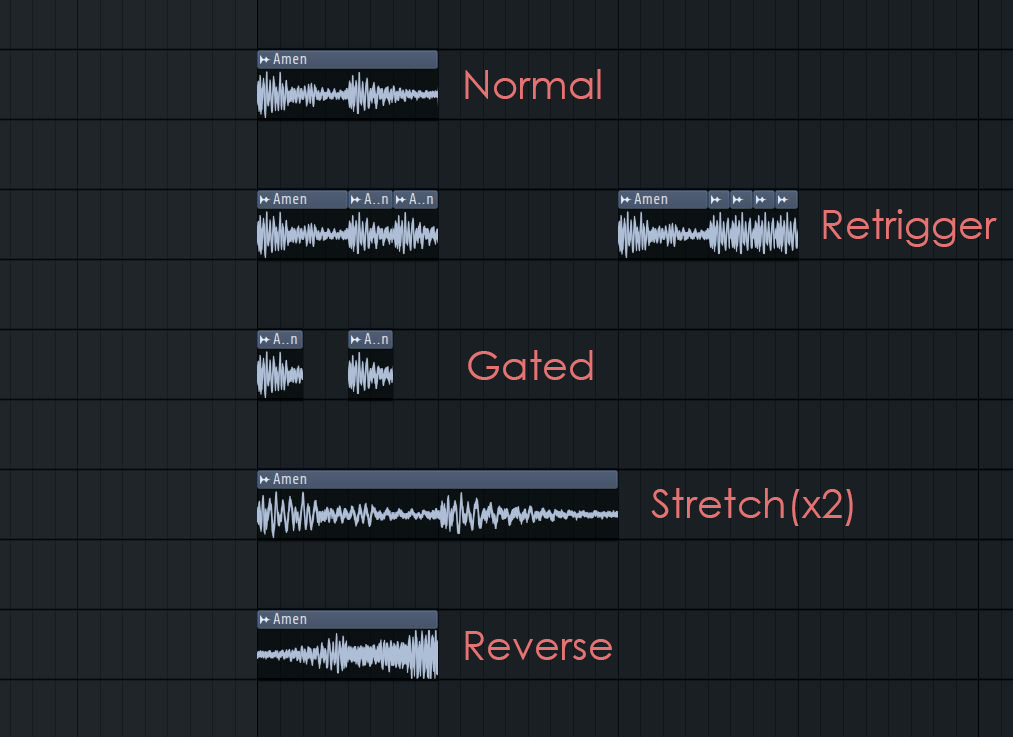
<style>
.page{position:relative;width:1013px;height:737px;background:#1a1f23}
.page>*{position:absolute;margin:0}
.t1{font:40px "CenturyGothic";color:#e47373}
</style>
<div class="page">
<p class="t1" style="left:465px;top:69px;width:136px;height:30px">Normal</p>
<p class="t1" style="left:823px;top:209px;width:174px;height:38px">Retrigger</p>
<p class="t1" style="left:468px;top:350px;width:125px;height:30px">Gated</p>
<p class="t1" style="left:651px;top:488px;width:202px;height:38px">Stretch(x2)</p>
<p class="t1" style="left:465px;top:631px;width:147px;height:29px">Reverse</p>
</div>
